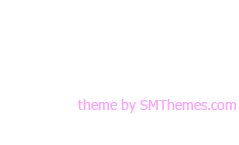
<style>
.page{position:relative;width:239px;height:145px;background:#ffffff}
.page>*{position:absolute;margin:0}
.t1{font:14px "Tahoma";color:#fea2ff}
</style>
<div class="page">
<p class="t1" style="left:78px;top:99px;width:158px;height:14px">theme by SMThemes.com</p>
</div>
